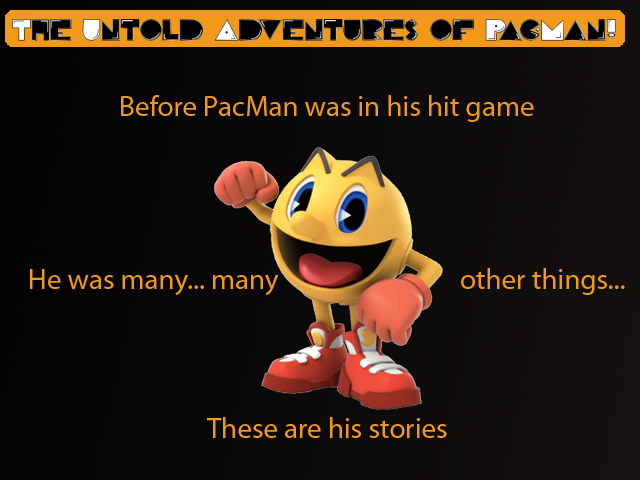
<style>
.page{position:relative;width:640px;height:480px}
.page>*{position:absolute;margin:0}
.t1{font:29px "MyriadPro-Regular";color:#f29919}
</style>
<div class="page">
<p class="t1" style="left:121px;top:95px;width:413px;height:27px">Before PacMan was in his hit game</p>
<p class="t1" style="left:30px;top:268px;width:595px;height:27px">He was many... many      other things...</p>
<p class="t1" style="left:207px;top:417px;width:240px;height:21px">These are his stories</p>
</div>
